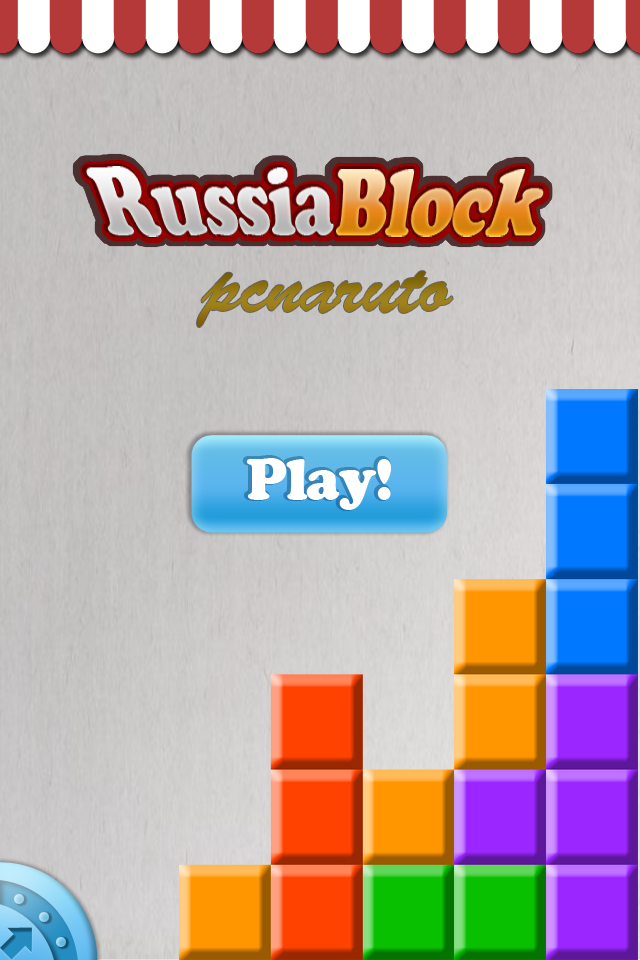
<style>
.page{position:relative;width:640px;height:960px}
.page>*{position:absolute;margin:0}
.t1{font:78px "BrushScriptStd";letter-spacing:-0.02em;color:#9a7c17}
.t2{font:60px "CooperBlack";letter-spacing:-0.02em;color:#ffffff}
</style>
<div class="page">
<p class="t1" style="left:197px;top:271px;width:256px;height:56px">pcnaruto</p>
<p class="t2" style="left:246px;top:458px;width:146px;height:52px">Play!</p>
</div>
